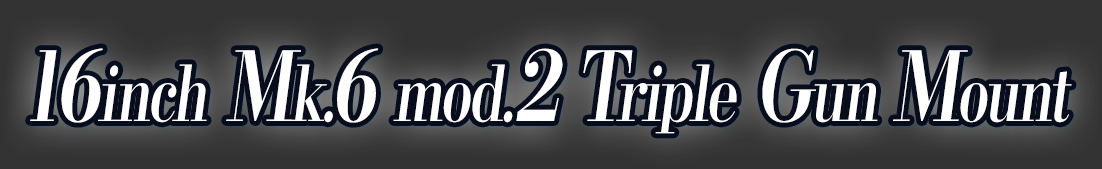
<style>
.page{position:relative;width:1102px;height:169px;background:#333333}
.page>*{position:absolute;margin:0}
.t1{font:76.8px "KochoStd-Heavy";letter-spacing:-0.05em;color:#ffffff;font-style:italic;scale:0.75 1}
.t2{font:96px "KochoStd-Heavy";letter-spacing:-0.05em;color:#ffffff;font-style:italic;scale:0.75 1}
</style>
<div class="page">
<p class="t1" style="left:30px;top:48px;width:1042px;height:86px"><span class="t2">16</span>inch<span class="t2"> M</span>k.<span class="t2">6 </span>mod.<span class="t2">2 T</span>riple<span class="t2"> G</span>un <span class="t2">M</span>ount</p>
</div>
